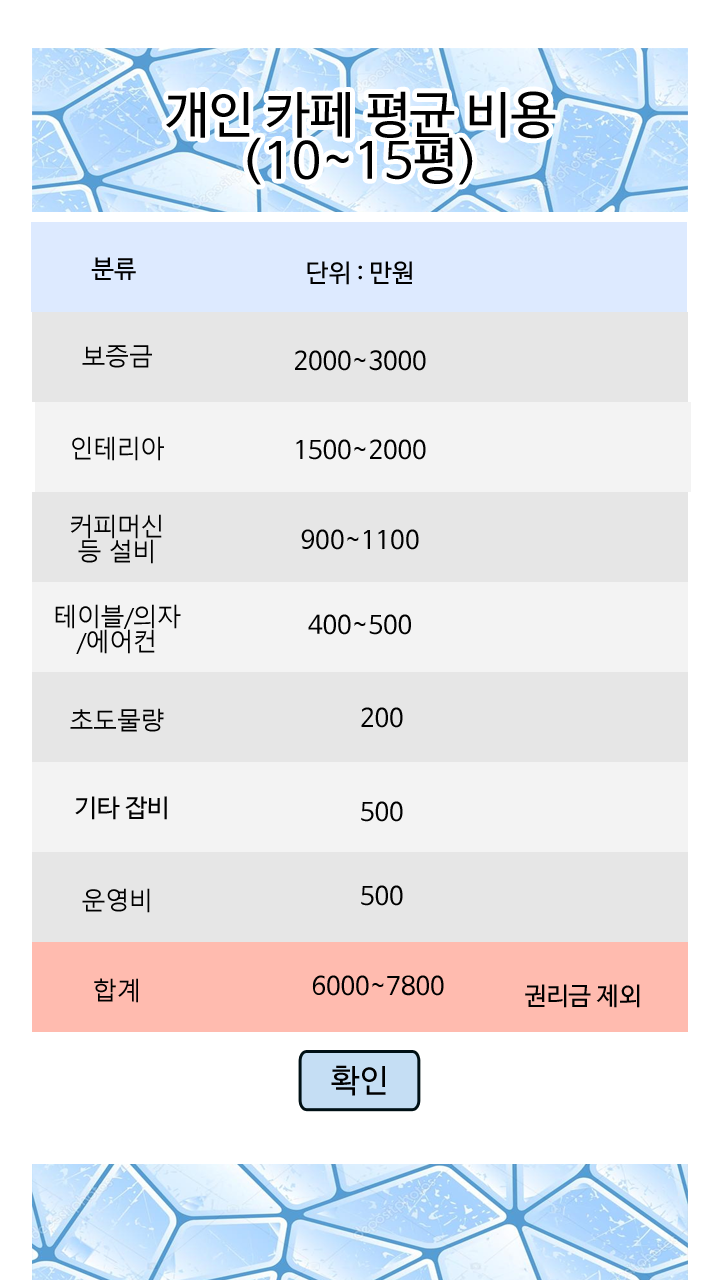
<style>
.page{position:relative;width:720px;height:1280px;background:#e6e6e6}
.page>*{position:absolute;margin:0}
.t1{font:50px/23px "NanumBarunGothic";color:#000000}
.t2{font:25px "NanumBarunGothic";color:#000000}
.t3{font:25px "MalgunGothic";letter-spacing:-0.05em;color:#000000}
.t4{font:25px/25px "MalgunGothic";letter-spacing:-0.05em;color:#000000}
.t5{font:32px "NanumBarunGothic";color:#000000}
</style>
<div class="page">
<p class="t1" style="left:166px;top:91px;width:390px;height:94px;text-align:center">개인 카페 평균 비용<br><br>(10~15평)</p>
<p class="t2" style="left:91px;top:257px;width:45px;height:23px">분류</p>
<p class="t2" style="left:307px;top:261px;width:105px;height:24px">단위 : 만원</p>
<p class="t3" style="left:82px;top:345px;width:70px;height:23px">보증금</p>
<p class="t2" style="left:295px;top:350px;width:131px;height:21px">2000~3000</p>
<p class="t3" style="left:72px;top:436px;width:92px;height:25px">인테리아</p>
<p class="t2" style="left:296px;top:439px;width:130px;height:21px">1500~2000</p>
<p class="t4" style="left:70px;top:514px;width:92px;height:50px;text-align:center">커피머신<br>등 설비</p>
<p class="t2" style="left:301px;top:529px;width:118px;height:21px">900~1100</p>
<p class="t4" style="left:55px;top:604px;width:126px;height:50px;text-align:center">테이블/의자<br>/에어컨</p>
<p class="t2" style="left:308px;top:614px;width:103px;height:21px">400~500</p>
<p class="t3" style="left:70px;top:708px;width:94px;height:24px">초도물량</p>
<p class="t2" style="left:361px;top:707px;width:42px;height:21px">200</p>
<p class="t2" style="left:75px;top:796px;width:92px;height:24px">기타 잡비</p>
<p class="t2" style="left:361px;top:801px;width:42px;height:21px">500</p>
<p class="t3" style="left:82px;top:888px;width:68px;height:25px">운영비</p>
<p class="t2" style="left:361px;top:885px;width:42px;height:21px">500</p>
<p class="t2" style="left:312px;top:975px;width:132px;height:21px">6000~7800</p>
<p class="t3" style="left:94px;top:978px;width:44px;height:25px">합계</p>
<p class="t2" style="left:525px;top:984px;width:115px;height:24px">권리금 제외</p>
<p class="t5" style="left:331px;top:1065px;width:55px;height:31px">확인</p>
</div>
